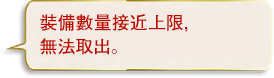
<style>
.page{position:relative;width:274px;height:78px;background:#f4ece4}
.page>*{position:absolute;margin:0}
.t1{font:18px/24px "FutoGoB101Pr5-Bold";color:#bd0800}
</style>
<div class="page">
<p class="t1" style="left:40px;top:14px;width:148px;height:41px">裝備數量接近上限，<br>無法取出。</p>
</div>
